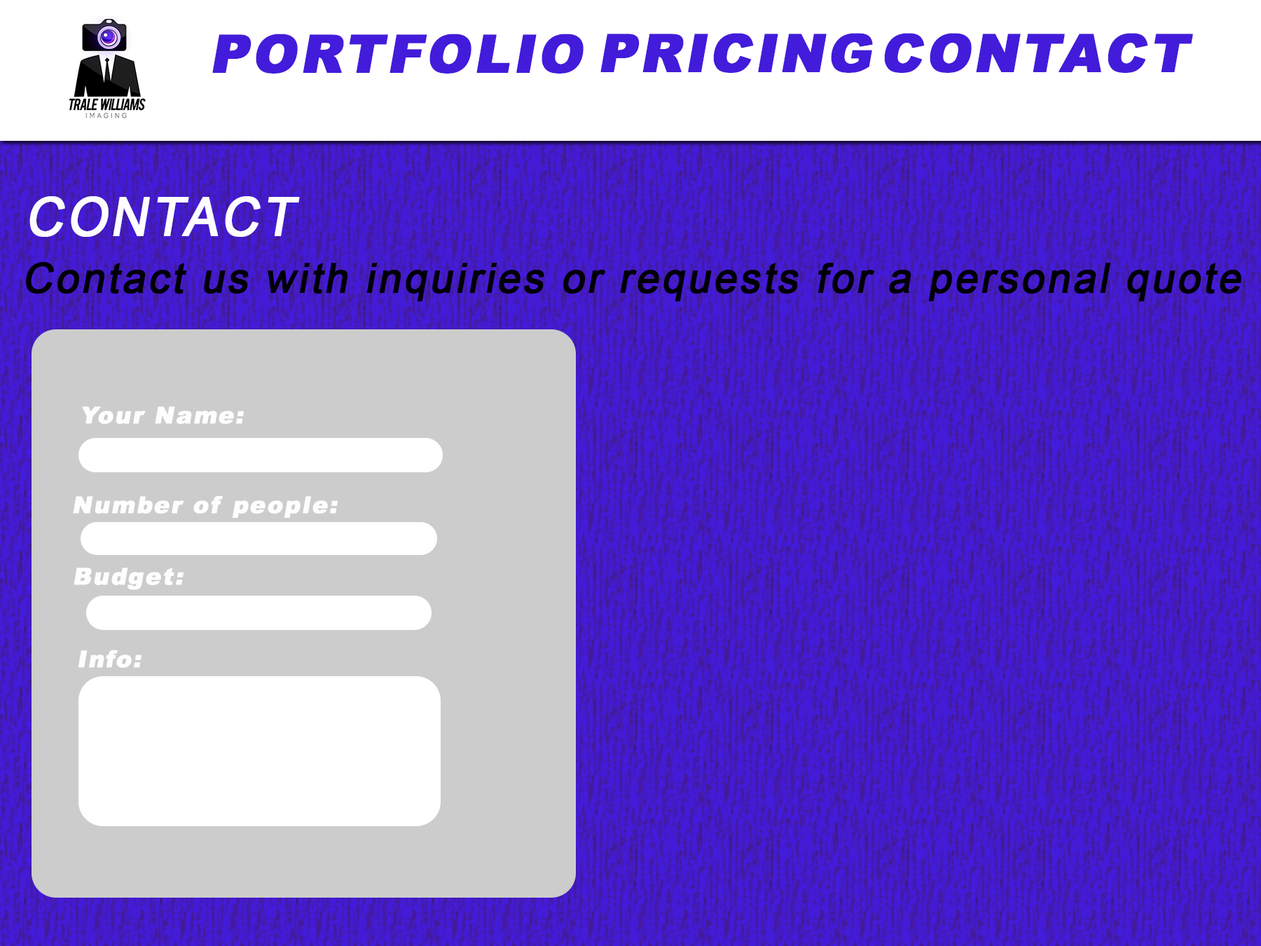
<style>
.page{position:relative;width:1261px;height:946px}
.page>*{position:absolute;margin:0}
.t1{font:54px "ArialMT";letter-spacing:0.05em;color:#fdfdff;font-weight:bold;font-style:italic;scale:0.95 1}
.t2{font:40.9px "ArialMT";letter-spacing:0.05em;color:#000002;font-weight:bold;font-style:italic}
.t3{font:23.4px "Arial-Black";letter-spacing:0.05em;color:#fdfdff;font-weight:bold;font-style:italic}
</style>
<div class="page">
<p class="t1" style="left:29px;top:196px;width:271px;height:41px">CONTACT</p>
<p class="t2" style="left:26px;top:262px;width:1215px;height:39px">Contact us with inquiries or requests for a personal quote</p>
<p class="t3" style="left:82px;top:406px;width:162px;height:18px">Your Name:</p>
<p class="t3" style="left:73px;top:495px;width:265px;height:23px">Number of people:</p>
<p class="t3" style="left:74px;top:567px;width:110px;height:23px">Budget:</p>
<p class="t3" style="left:78px;top:649px;width:64px;height:19px">Info:</p>
</div>
